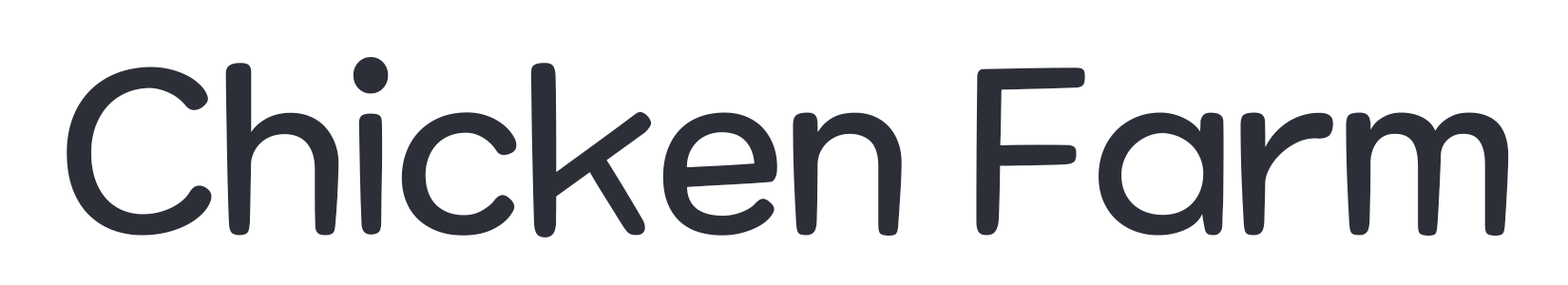
<style>
.page{position:relative;width:1568px;height:285px;background:#ffffff}
.page>*{position:absolute;margin:0}
.t1{font:228.1px "MaplestoryLight";letter-spacing:-0.02em;color:#2c2f38}
</style>
<div class="page">
<p class="t1" style="left:67px;top:57px;width:1442px;height:181px">Chicken Farm</p>
<p class="t1" style="left:72px;top:63px;width:1443px;height:180px">Chicken Farm</p>
</div>
